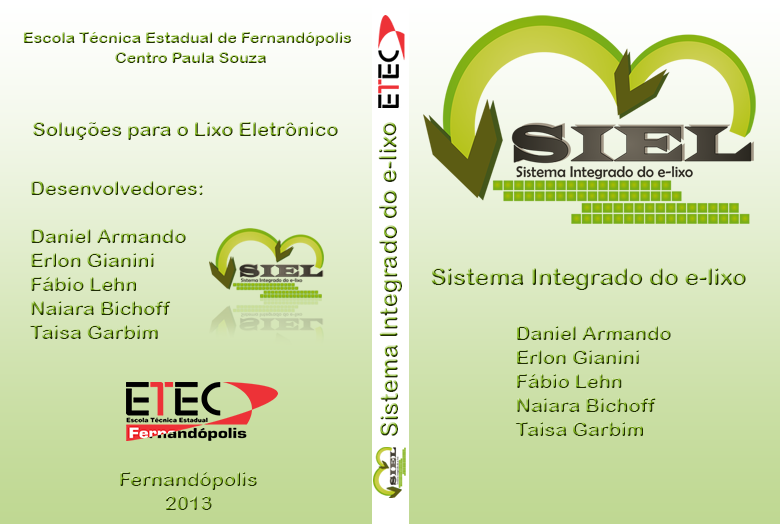
<style>
.page{position:relative;width:780px;height:524px}
.page>*{position:absolute;margin:0}
.t1{font:16px "ArialRoundedMTBold"}
.t2{font:20px "ArialRoundedMTBold"}
.t3{font:24px "ArialRoundedMTBold"}
.t4{font:19.9px "ArialRoundedMTBold"}
</style>
<div class="page">
<p class="t1" style="left:23px;top:32px;width:328px;height:31px">Escola Técnica Estadual de Fernandópolis<br>       Centro Paula Souza</p>
<p class="t2" style="left:33px;top:122px;width:305px;height:18px">Soluções para o Lixo Eletrônico</p>
<p class="t3" style="left:378px;top:122px;width:24px;height:314px;rotate:-90deg">Sistema Integrado do e-lixo</p>
<p class="t4" style="left:30px;top:181px;width:173px;height:158px">Desenvolvedores:<br><br>Daniel Armando <br>Erlon Gianini<br>Fábio Lehn<br>Naiara Bichoff<br>Taisa Garbim</p>
<p class="t3" style="left:431px;top:268px;width:315px;height:22px">Sistema Integrado do e-lixo</p>
<p class="t2" style="left:515px;top:326px;width:156px;height:110px">Daniel Armando <br>Erlon Gianini<br>Fábio Lehn<br>Naiara Bichoff<br>Taisa Garbim</p>
<p class="t2" style="left:120px;top:472px;width:137px;height:38px">Fernandópolis <br>   2013</p>
</div>
